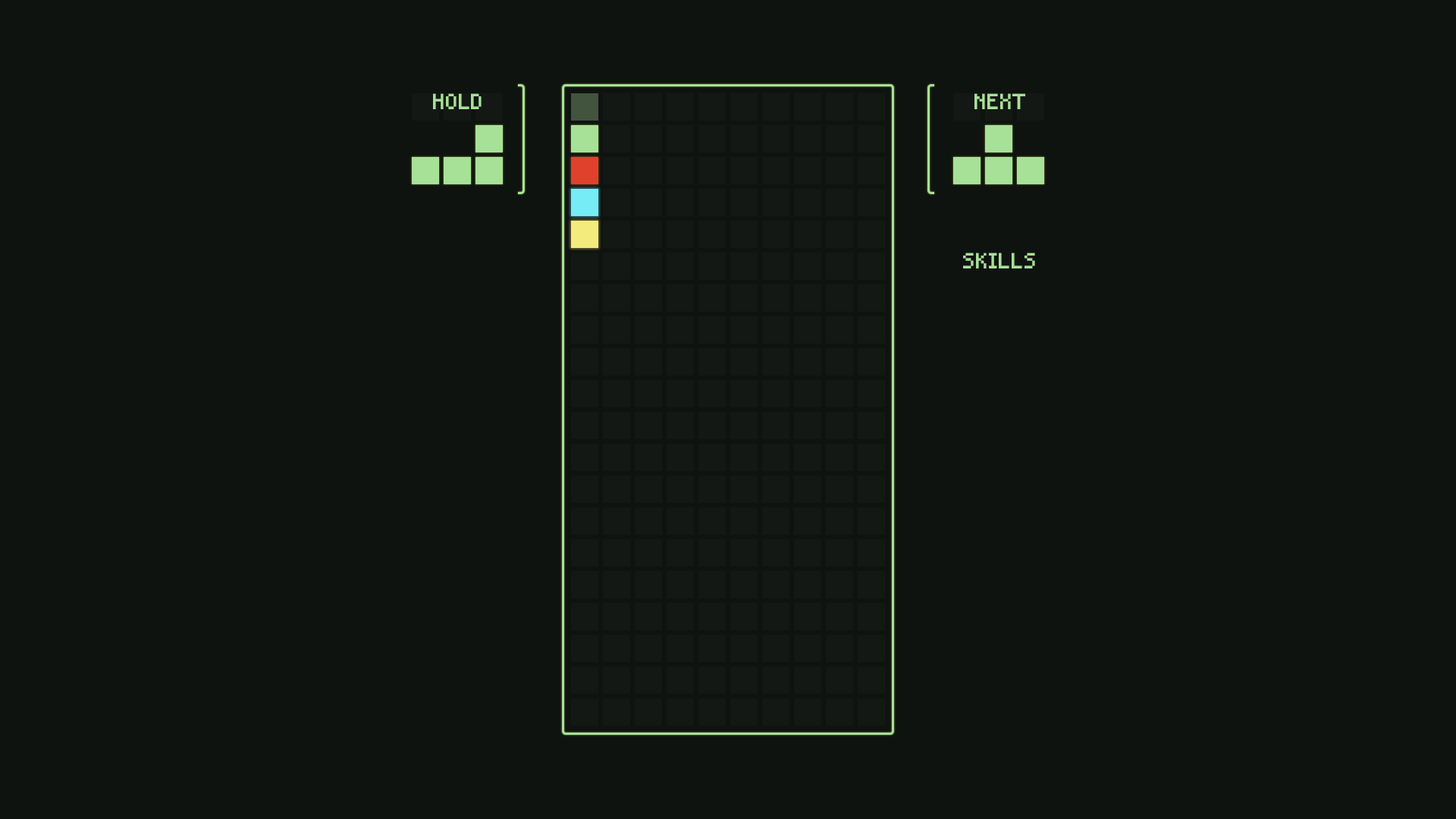
<style>
.page{position:relative;width:1456px;height:819px;background:#0f1310}
.page>*{position:absolute;margin:0}
.t1{font:20.5px "Mouse";color:#a7e197}
</style>
<div class="page">
<p class="t1" style="left:433px;top:93px;width:49px;height:16px">HOLD</p>
<p class="t1" style="left:974px;top:93px;width:51px;height:16px">NEXT</p>
<p class="t1" style="left:963px;top:253px;width:72px;height:15px">SKILLS</p>
</div>
